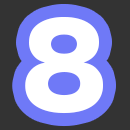
<style>
.page{position:relative;width:130px;height:130px;background:#333333}
.page>*{position:absolute;margin:0}
.t1{font:110.5px "HiraKakuStdN-W8";color:#ffffff}
</style>
<div class="page">
<p class="t1" style="left:25px;top:17px;width:78px;height:97px">８</p>
</div>
